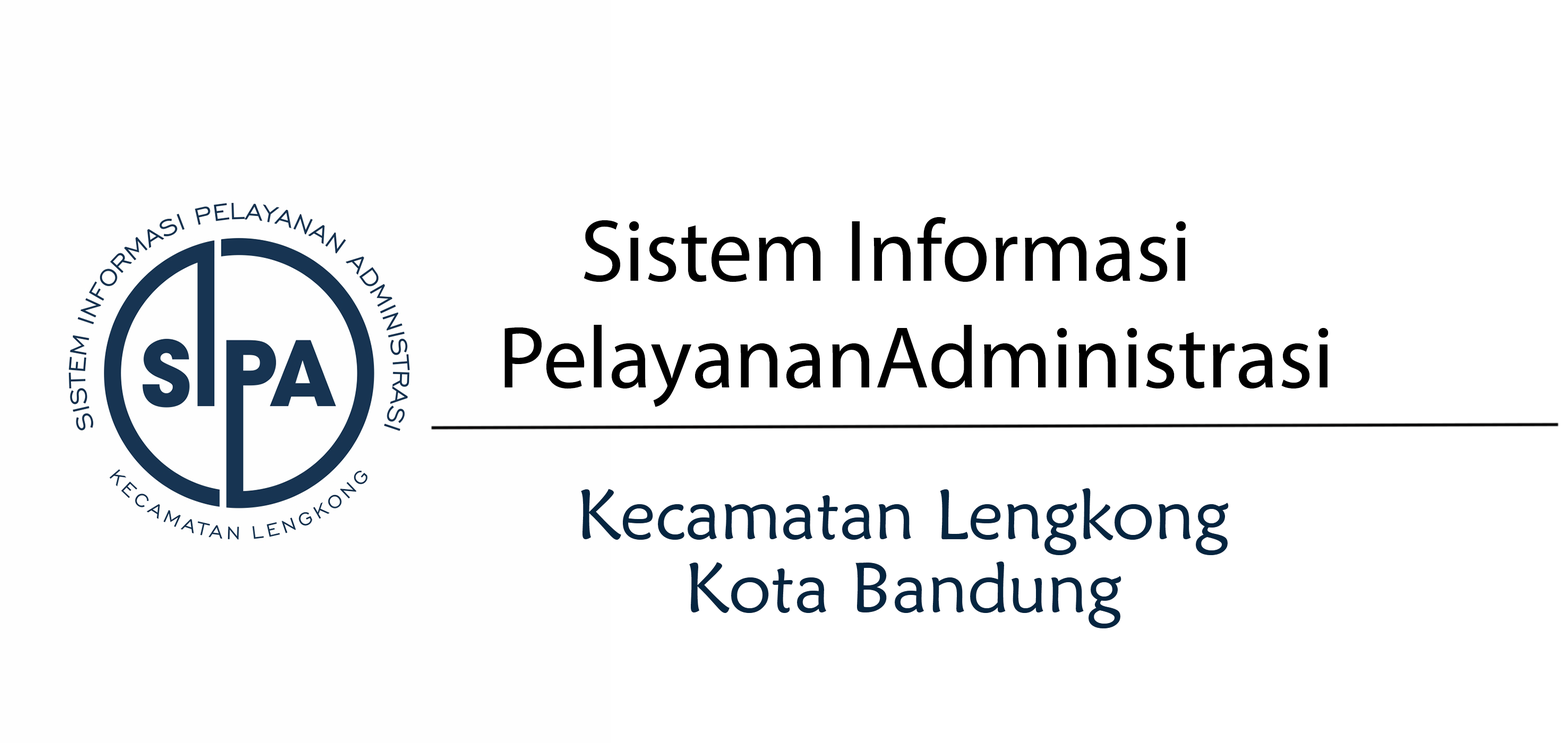
<style>
.page{position:relative;width:1568px;height:743px;background:#ffffff}
.page>*{position:absolute;margin:0}
.t1{font:88.5px "MyriadPro-Regular";color:#000000}
.t2{font:70.8px "MaiandraGD-Regular";color:#052540}
</style>
<div class="page">
<p class="t1" style="left:584px;top:217px;width:602px;height:65px">Sistem Informasi</p>
<p class="t1" style="left:504px;top:325px;width:825px;height:82px">PelayananAdministrasi</p>
<p class="t2" style="left:581px;top:489px;width:648px;height:66px">Kecamatan Lengkong</p>
<p class="t2" style="left:689px;top:562px;width:432px;height:67px">Kota Bandung</p>
</div>
